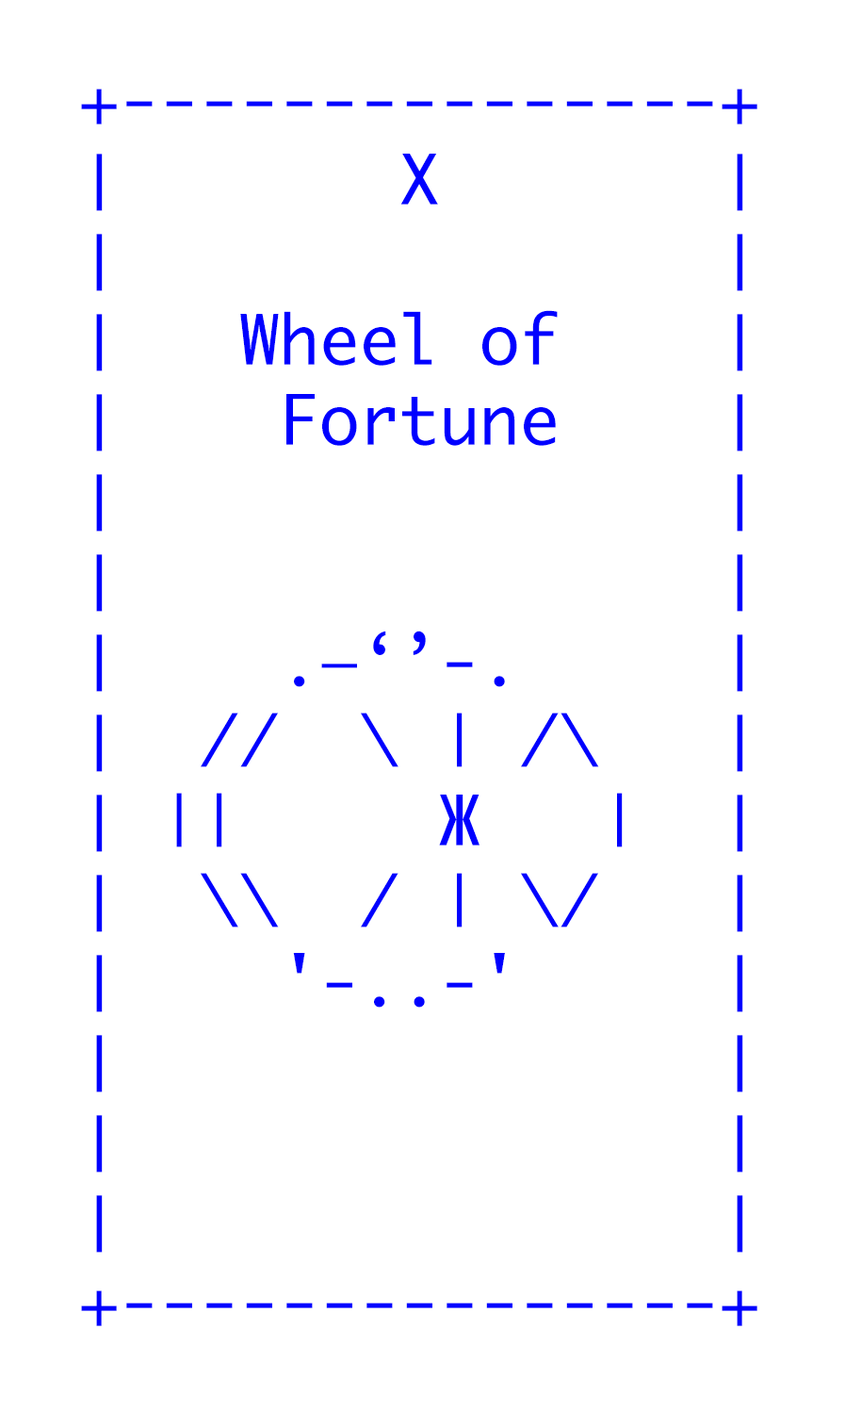
<style>
.page{position:relative;width:845px;height:1411px;background:#ffffff}
.page>*{position:absolute;margin:0}
.t1{font:66.7px "Monaco";color:#0000ff}
</style>
<div class="page">
<p class="t1" style="left:81px;top:89px;width:677px;height:1237px">+---------------+<br>│       X       │<br>│               │<br>│   Wheel of    │<br>│    Fortune    │<br>│               │<br>│               │ <br>│    .—‘’-.     │<br>│  //  \ | /\   │<br>│ ||     Ж   |  │<br>│  \\  / | \/   │<br>│    '-..-'     │<br>│               │<br>│               │<br>│               │<br>+---------------+<br><br><br><br><br>├───────────────┤</p>
</div>
